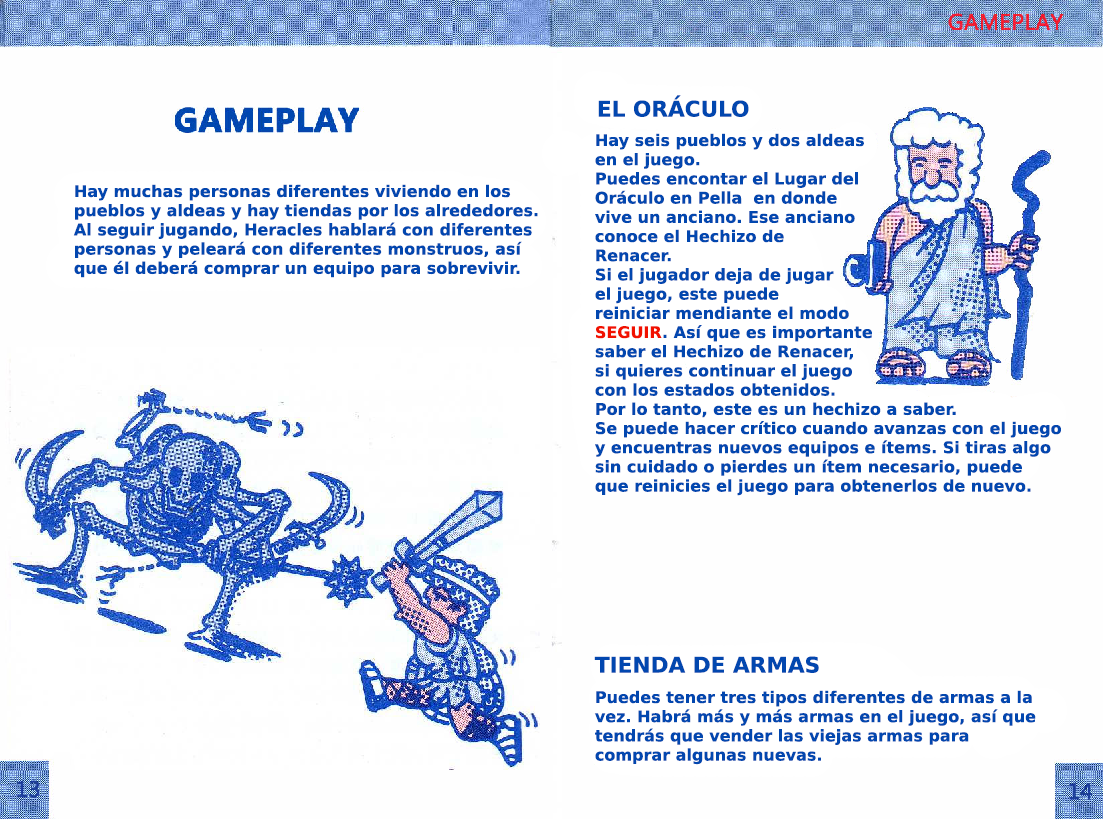
<style>
.page{position:relative;width:1103px;height:819px;background:#fefefe}
.page>*{position:absolute;margin:0}
.t1{font:21.6px "PrimaSansBT-Bold";color:#0247af}
.t2{font:16px "PrimaSansBT-Bold";color:#0247af}
.t3{font:16px "PrimaSansBT-Bold";color:#f11100}
</style>
<div class="page">
<p class="t1" style="left:598px;top:95px;width:151px;height:22px">EL ORÁCULO</p>
<p class="t2" style="left:595px;top:133px;width:466px;height:363px">Hay seis pueblos y dos aldeas <br>en el juego.<br>Puedes encontar el Lugar del <br>Oráculo en Pella  en donde <br>vive un anciano. Ese anciano <br>conoce el Hechizo de <br>Renacer.<br>Si el jugador deja de jugar <br>el juego, este puede <br>reiniciar mendiante el modo<br><span class="t3">SEGUIR</span>. Así que es importante <br>saber el Hechizo de Renacer, <br>si quieres continuar el juego <br>con los estados obtenidos.<br>Por lo tanto, este es un hechizo a saber.<br>Se puede hacer crítico cuando avanzas con el juego<br>y encuentras nuevos equipos e ítems. Si tiras algo sin cuidado o pierdes un ítem necesario, puede<br>que reinicies el juego para obtenerlos de nuevo.</p>
<p class="t2" style="left:73px;top:184px;width:465px;height:94px">Hay muchas personas diferentes viviendo en los pueblos y aldeas y hay tiendas por los alrededores.<br>Al seguir jugando, Heracles hablará con diferentes<br>personas y peleará con diferentes monstruos, así que él deberá comprar un equipo para sobrevivir.</p>
<p class="t1" style="left:594px;top:656px;width:225px;height:17px">TIENDA DE ARMAS</p>
<p class="t2" style="left:595px;top:690px;width:441px;height:75px">Puedes tener tres tipos diferentes de armas a la<br>vez. Habrá más y más armas en el juego, así que<br>tendrás que vender las viejas armas para <br>comprar algunas nuevas.</p>
</div>
